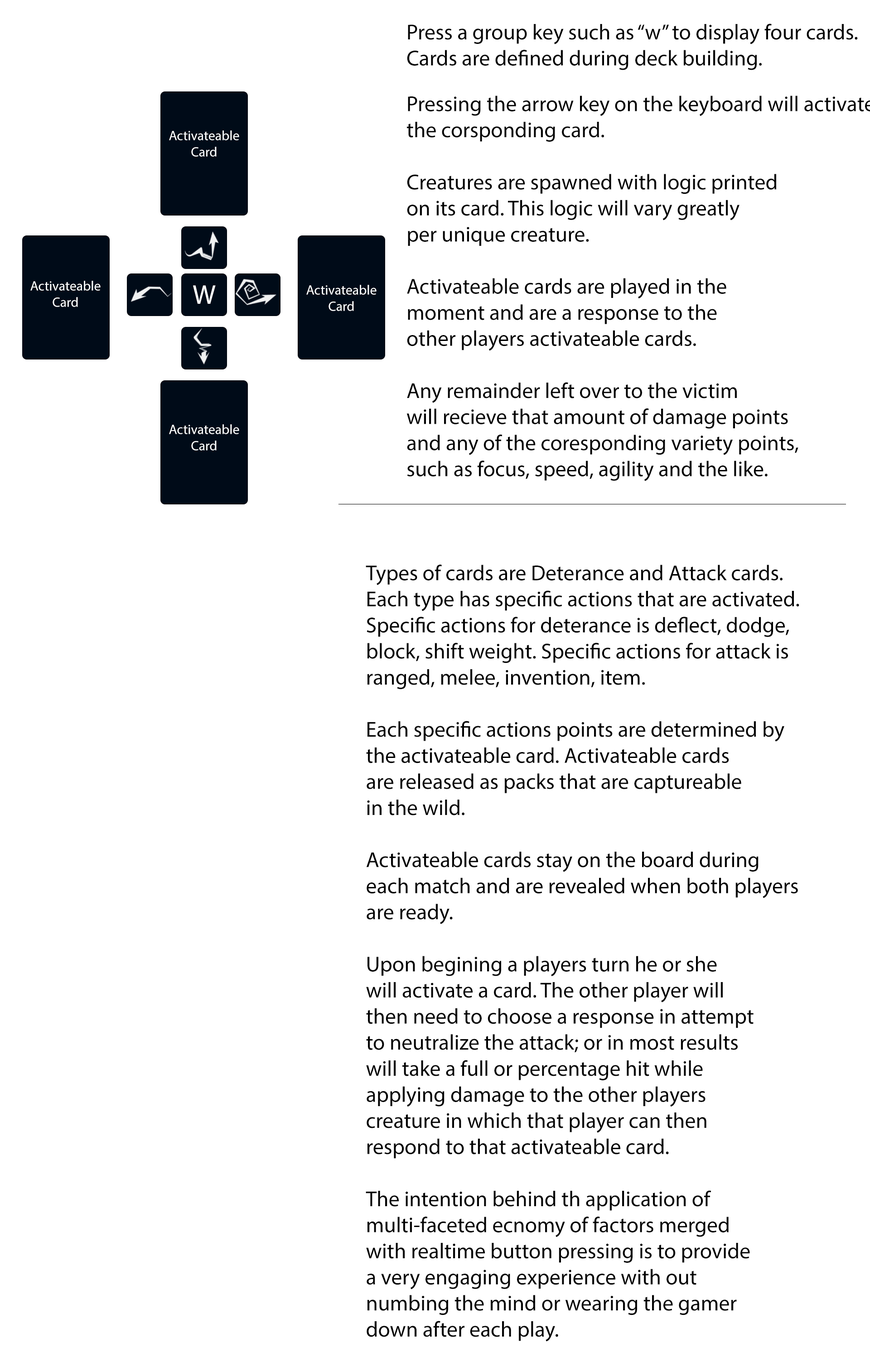
<style>
.page{position:relative;width:870px;height:1371px;background:#ffffff}
.page>*{position:absolute;margin:0}
.t1{font:13.6px "MyriadPro-Regular";color:#ffffff}
.t2{font:27.2px "MyriadPro-Regular";color:#ffffff}
.t3{font:21.7px "MyriadPro-Regular";color:#000000}
</style>
<div class="page">
<p class="t1" style="left:169px;top:130px;width:70px;height:27px;text-align:center">Activateable<br>Card</p>
<p class="t1" style="left:30px;top:281px;width:71px;height:26px;text-align:center">Activateable<br>Card</p>
<p class="t2" style="left:193px;top:285px;width:23px;height:19px">W</p>
<p class="t1" style="left:306px;top:285px;width:70px;height:26px;text-align:center">Activateable<br>Card</p>
<p class="t1" style="left:169px;top:424px;width:70px;height:27px;text-align:center">Activateable<br>Card</p>
<p class="t3" style="left:365px;top:565px;width:434px;height:777px">Types of cards are Deterance and Attack cards.<br>Each type has specific actions that are activated.<br>Specific actions for deterance is deflect, dodge, <br>block, shift weight. Specific actions for attack is<br>ranged, melee, invention, item.<br><br>Each specific actions points are determined by<br>the activateable card. Activateable cards<br>are released as packs that are captureable<br>in the wild.<br><br>Activateable cards stay on the board during<br>each match and are revealed when both players<br>are ready.<br><br>Upon begining a players turn he or she<br>will activate a card. The other player will<br>then need to choose a response in attempt<br>to neutralize the attack; or in most results<br>will take a full or percentage hit while<br>applying damage to the other players<br>creature in which that player can then<br>respond to that activateable card.<br><br>The intention behind th application of<br>multi-faceted ecnomy of factors merged<br>with realtime button pressing is to provide<br>a very engaging experience with out<br>numbing the mind or wearing the gamer<br>down after each play.</p>
</div>
